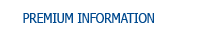
<style>
.page{position:relative;width:215px;height:35px;background:#ffffff}
.page>*{position:absolute;margin:0}
.t1{font:14px "Tahoma";color:#014a8f;scale:0.84 1}
</style>
<div class="page">
<p class="t1" style="left:23px;top:13px;width:131px;height:10px">PREMIUM INFORMATION</p>
</div>
